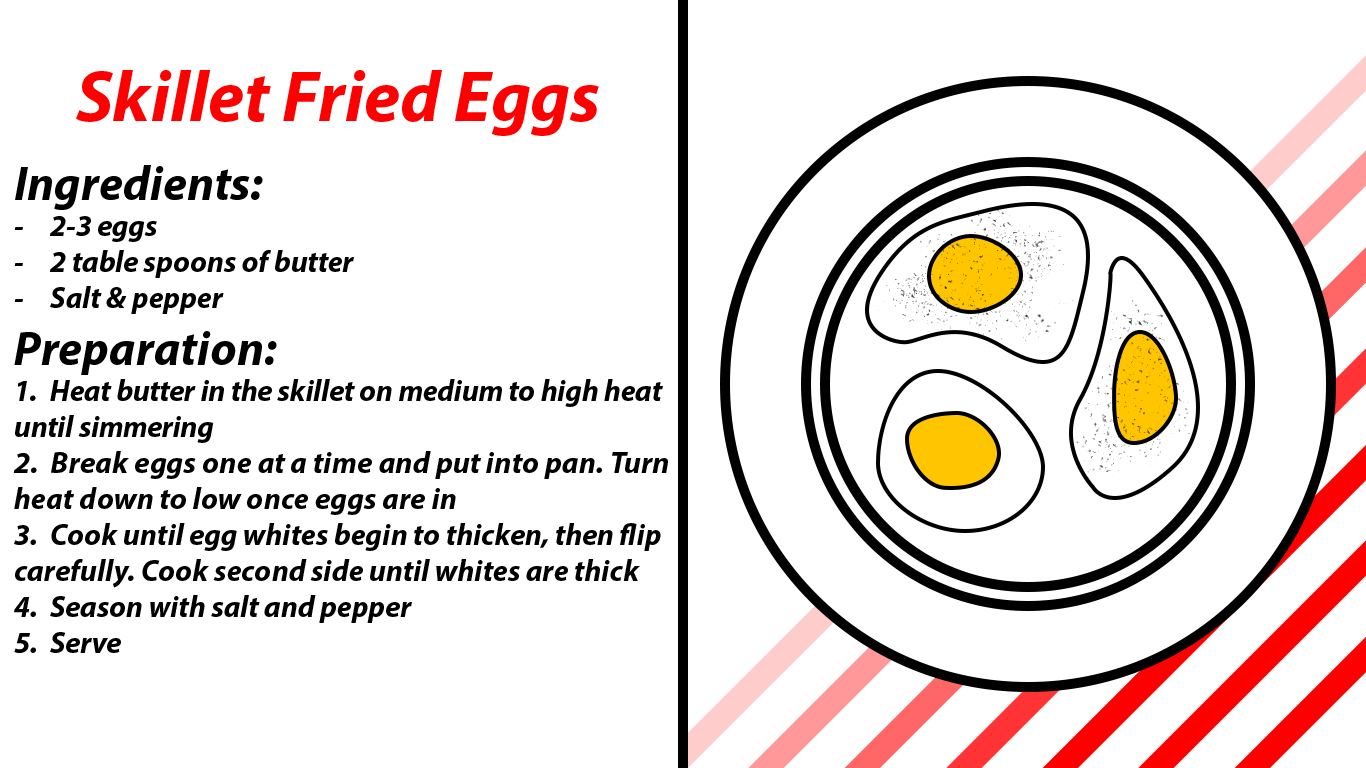
<style>
.page{position:relative;width:1366px;height:768px;background:#ffffff}
.page>*{position:absolute;margin:0}
.t1{font:72px "MyriadPro-BoldIt";color:#ff0000}
.t2{font:30px "MyriadPro-BoldIt";color:#000000}
.t3{font:48px "MyriadPro-BoldIt";color:#000000}
</style>
<div class="page">
<p class="t1" style="left:76px;top:70px;width:523px;height:66px">Skillet Fried Eggs</p>
<p class="t2" style="left:13px;top:165px;width:655px;height:488px"><span class="t3">Ingredients:<br></span>- 2-3 eggs <br>- 2 table spoons of butter <br>- Salt &amp; pepper<br><span class="t3">Preparation:<br></span>1. Heat butter in the skillet on medium to high heat until simmering<br>2. Break eggs one at a time and put into pan. Turn heat down to low once eggs are in <br>3. Cook until egg whites begin to thicken, then flip carefully. Cook second side until whites are thick<br>4. Season with salt and pepper <br>5. Serve</p>
</div>
